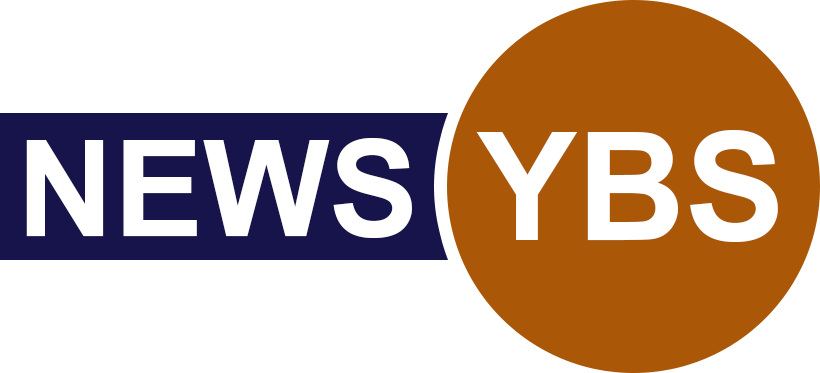
<style>
.page{position:relative;width:820px;height:373px;background:#ffffff}
.page>*{position:absolute;margin:0}
.t1{font:150px "Arial-BoldMT";color:#ffffff}
.t2{font:134px "Arial-BoldMT";color:#ffffff}
</style>
<div class="page">
<p class="t1" style="left:476px;top:130px;width:302px;height:112px">YBS</p>
<p class="t2" style="left:26px;top:138px;width:386px;height:100px">NEWS</p>
</div>
